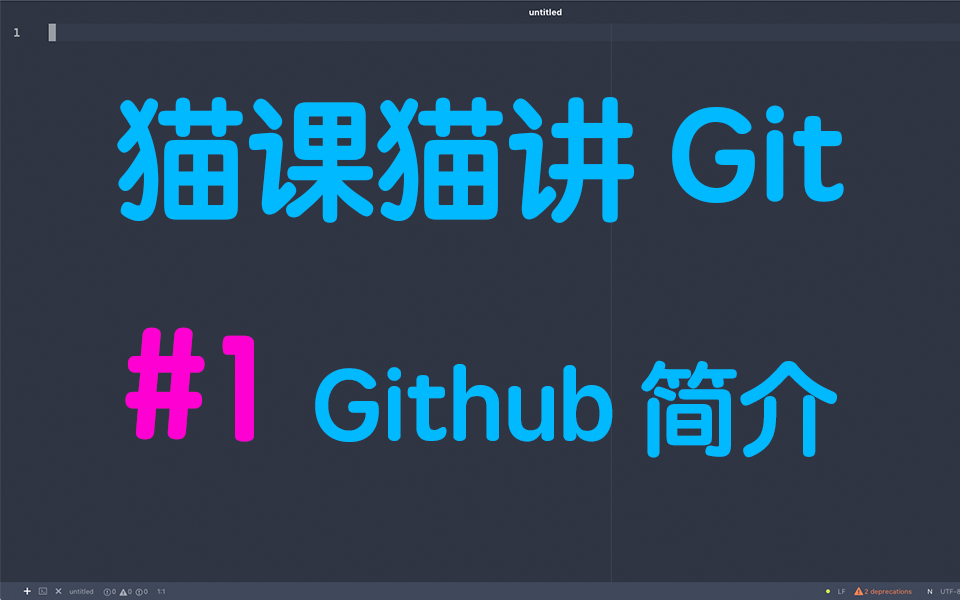
<style>
.page{position:relative;width:960px;height:600px;background:#2f3543}
.page>*{position:absolute;margin:0}
.t1{font:130px "STYuanti-SC-Bold";color:#00b9fe}
.t2{font:100px "STYuanti-SC-Bold";color:#00b9fe}
.t3{font:150px "STYuanti-SC-Bold";color:#fe00d1}
</style>
<div class="page">
<p class="t1" style="left:117px;top:97px;width:727px;height:126px">猫课猫讲 Git</p>
<p class="t2" style="left:125px;top:327px;width:712px;height:131px"><span class="t3">#1</span>  Github 简介</p>
</div>
